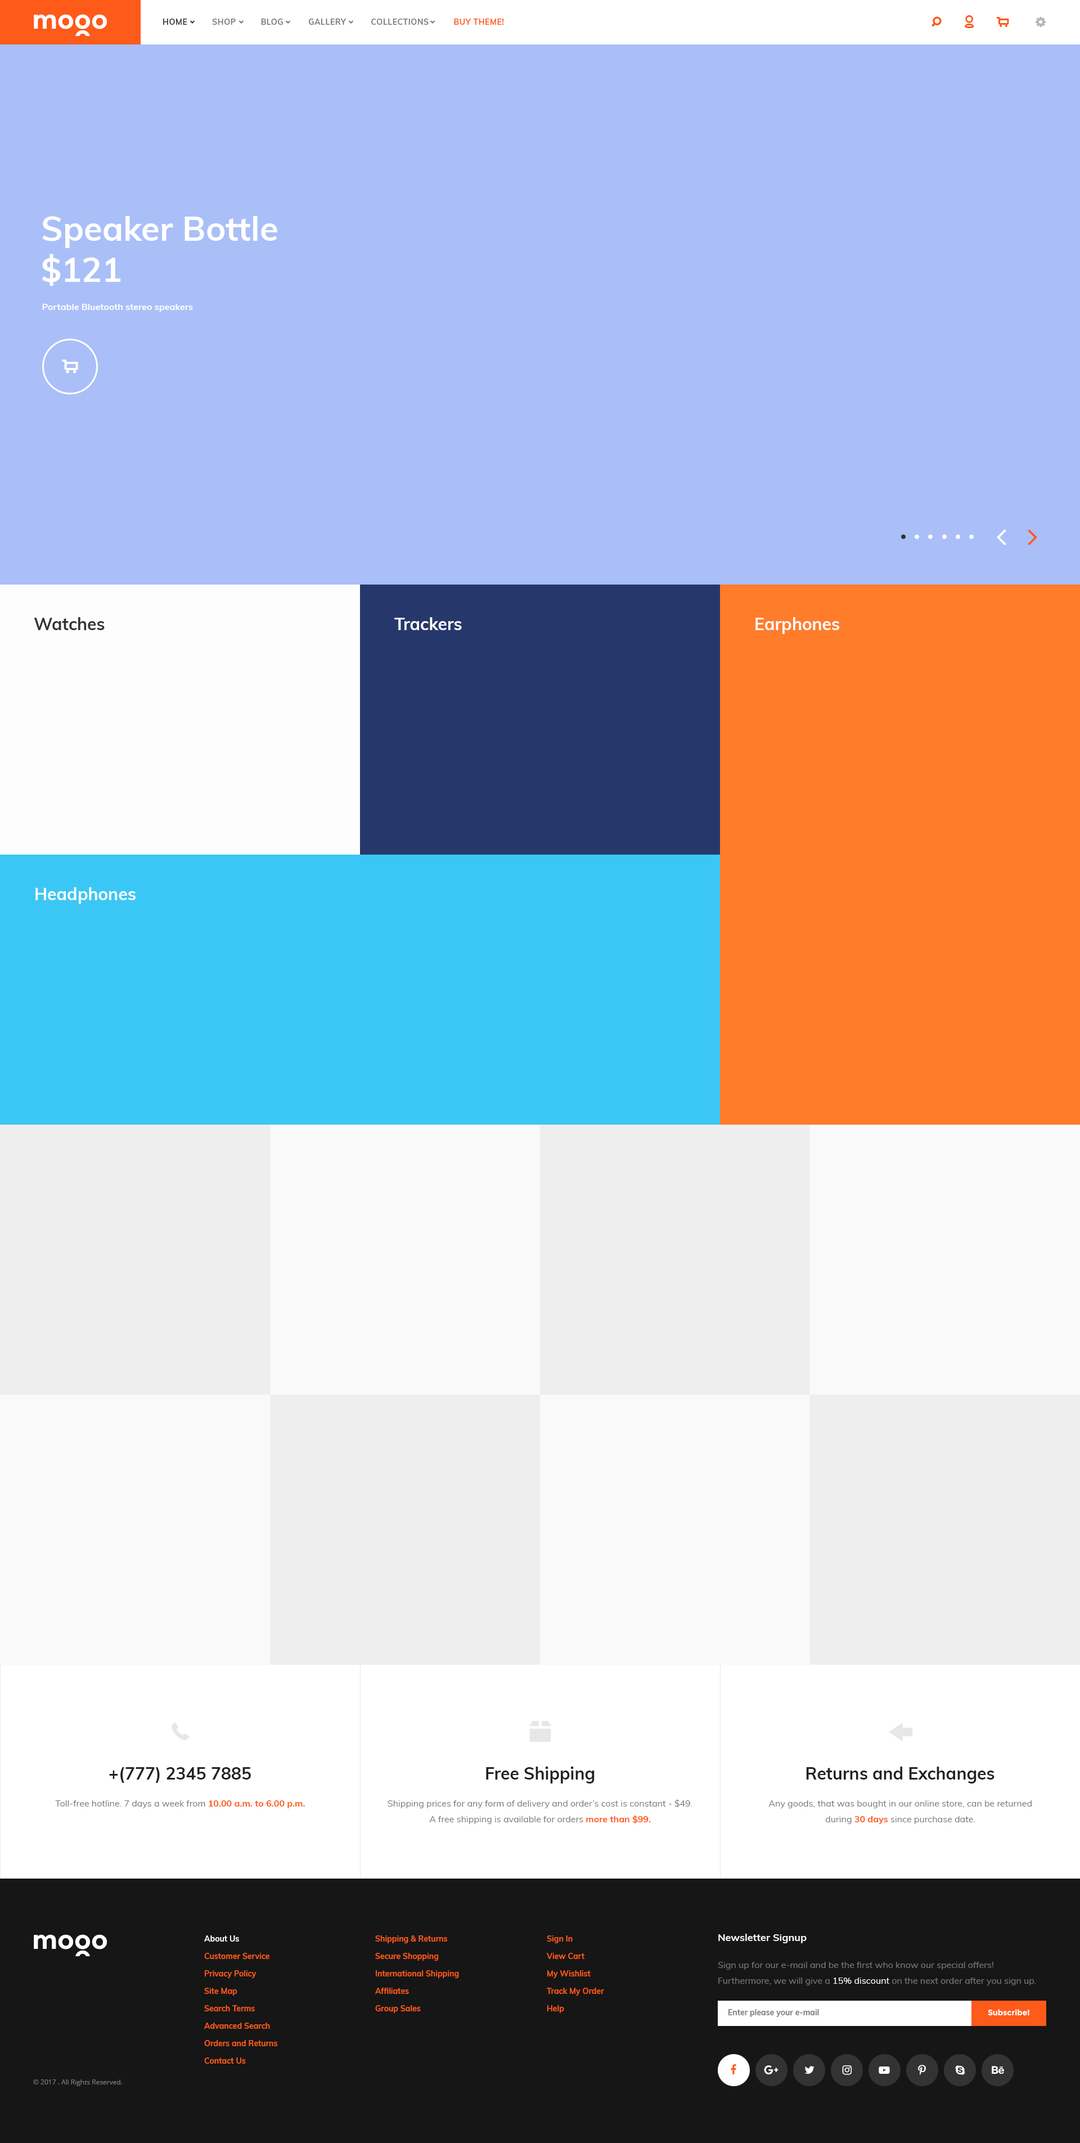
<style>
.page{position:relative;width:1080px;height:2143px;background:#aabff8}
.page>*{position:absolute;margin:0}
.t1{font:7.9px "Muli-Bold";letter-spacing:0.04em;color:#777777;text-transform:uppercase}
.t2{font:7.9px "Muli-Bold";letter-spacing:0.04em;color:#333333;text-transform:uppercase}
.t3{font:7.9px "Muli-Bold";letter-spacing:0.04em;color:#fe5a1a;text-transform:uppercase}
.t4{font:33.8px/41.1px "Muli-Bold";color:#ffffff}
.t5{font:9px "Muli-Bold";color:#ffffff}
.t6{font:16.9px "Muli-Bold";color:#333333}
.t7{font:16.9px "Muli-Bold";color:#ffffff}
.t8{font:16.9px "Muli-Bold";color:#222222}
.t9{font:9px "Muli-Regular";color:#777777}
.t10{font:9px "Muli-Bold";color:#fe5a1a}
.t11{font:9px/15.8px "Muli-Regular";color:#777777}
.t12{font:9px/15.8px "Muli-Bold";color:#fe5a1a}
.t13{font:25.9px "Montserrat-Bold";color:#ffffff}
.t14{font:7.9px/17.4px "Muli-Bold";color:#fe5a1a}
.t15{font:7.9px/17.4px "Muli-Bold";color:#ffffff}
.t16{font:10.1px "Muli-Bold";color:#ffffff}
.t17{font:9px/15.8px "Muli-Regular";color:#ffffff}
.t18{font:7.9px "Muli-Bold";color:#777777}
.t19{font:7.9px "Montserrat-Bold";color:#ffffff}
.t20{font:6.8px "OpenSans";color:#777777}
</style>
<div class="page">
<p class="t1" style="left:163px;top:19px;width:341px;height:6px"><span class="t2">hOME    </span>      Shop          bLOG          gALLERY          Collections          <span class="t3">BUY THEME!</span></p>
<p class="t4" style="left:42px;top:216px;width:235px;height:70px">Speaker Bottle<br>$121</p>
<p class="t5" style="left:42px;top:304px;width:151px;height:8px">Portable Bluetooth stereo speakers</p>
<p class="t6" style="left:34px;top:617px;width:71px;height:13px">Watches</p>
<p class="t7" style="left:394px;top:617px;width:68px;height:13px">Trackers</p>
<p class="t7" style="left:755px;top:617px;width:84px;height:17px">Earphones</p>
<p class="t7" style="left:35px;top:887px;width:101px;height:17px">Headphones</p>
<p class="t8" style="left:109px;top:1767px;width:142px;height:16px">+(777) 2345 7885</p>
<p class="t8" style="left:486px;top:1766px;width:109px;height:17px">Free Shipping</p>
<p class="t8" style="left:806px;top:1766px;width:188px;height:17px">Returns and Exchanges</p>
<p class="t9" style="left:55px;top:1800px;width:250px;height:8px">Toll-free hotline. 7 days a week from <span class="t10">10.00 a.m. to 6.00 p.m.</span></p>
<p class="t11" style="left:388px;top:1799px;width:304px;height:25px;text-align:center">Shipping prices for any form of delivery and order’s cost is constant - $49.  A free shipping is available for orders <span class="t12">more than $99.</span></p>
<p class="t11" style="left:768px;top:1800px;width:264px;height:24px;text-align:center">Any goods, that was bought in our online store, can be returned during <span class="t12">30 days</span> since purchase date.</p>
<p class="t13" style="left:34px;top:1934px;width:73px;height:15px">mooo</p>
<p class="t14" style="left:204px;top:1935px;width:73px;height:128px"><span class="t15">About Us<br></span>Customer Service<br>Privacy Policy<br>Site Map<br>Search Terms<br>Advanced Search<br>Orders and Returns<br>Contact Us</p>
<p class="t14" style="left:375px;top:1935px;width:84px;height:78px">Shipping &amp; Returns<br>Secure Shopping<br>International Shipping<br>Affiliates<br>Group Sales</p>
<p class="t14" style="left:546px;top:1935px;width:58px;height:78px">Sign In<br>View Cart<br>My Wishlist<br>Track My Order<br>Help</p>
<p class="t16" style="left:718px;top:1933px;width:89px;height:10px">Newsletter Signup</p>
<p class="t11" style="left:718px;top:1961px;width:318px;height:25px">Sign up for our e-mail and be the first who know our special offers! <br>Furthermore, we will give a <span class="t17">15% discount </span>on the next order after you sign up.</p>
<p class="t18" style="left:728px;top:2009px;width:91px;height:8px">Enter please your e-mail</p>
<p class="t19" style="left:988px;top:2009px;width:41px;height:6px">Subscribe!</p>
<p class="t20" style="left:33px;top:2079px;width:90px;height:7px">© 2017 . All Rights Reserved.</p>
</div>
